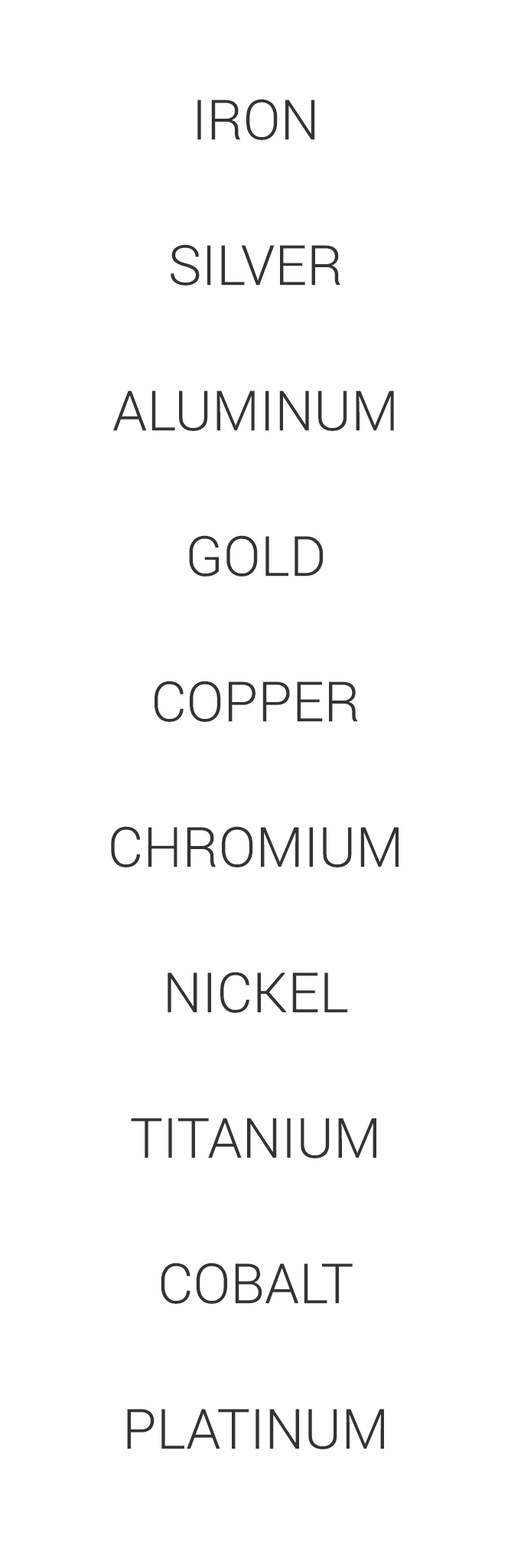
<style>
.page{position:relative;width:511px;height:1568px;background:#ffffff}
.page>*{position:absolute;margin:0}
.t1{font:55.3px/145.5px "Roboto-Light";color:#333333;text-transform:uppercase}
</style>
<div class="page">
<p class="t1" style="left:111px;top:99px;width:288px;height:1350px;text-align:center">IRON<br>SILVER<br>ALUMINUM<br>GOLD<br>COPPER<br>CHROMIUM<br>NICKEL<br>TITANIUM<br>COBALT<br>PLATINUM</p>
</div>
